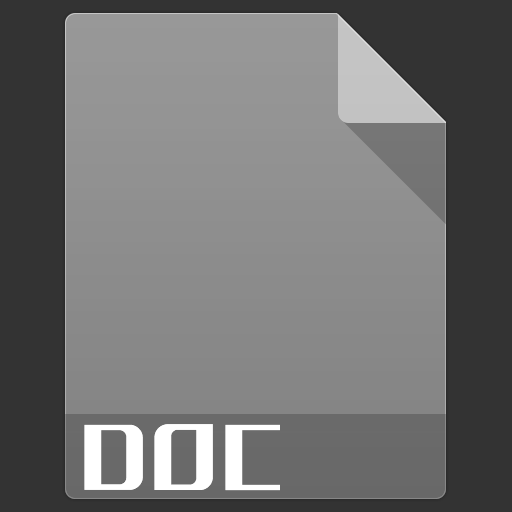
<style>
.page{position:relative;width:512px;height:512px;background:#333333}
.page>*{position:absolute;margin:0}
.t1{font:72px "MFLiHei_Noncommercial-Regular";letter-spacing:0.07em;color:#ffffff}
</style>
<div class="page">
<p class="t1" style="left:84px;top:424px;width:196px;height:67px">DOC</p>
</div>
